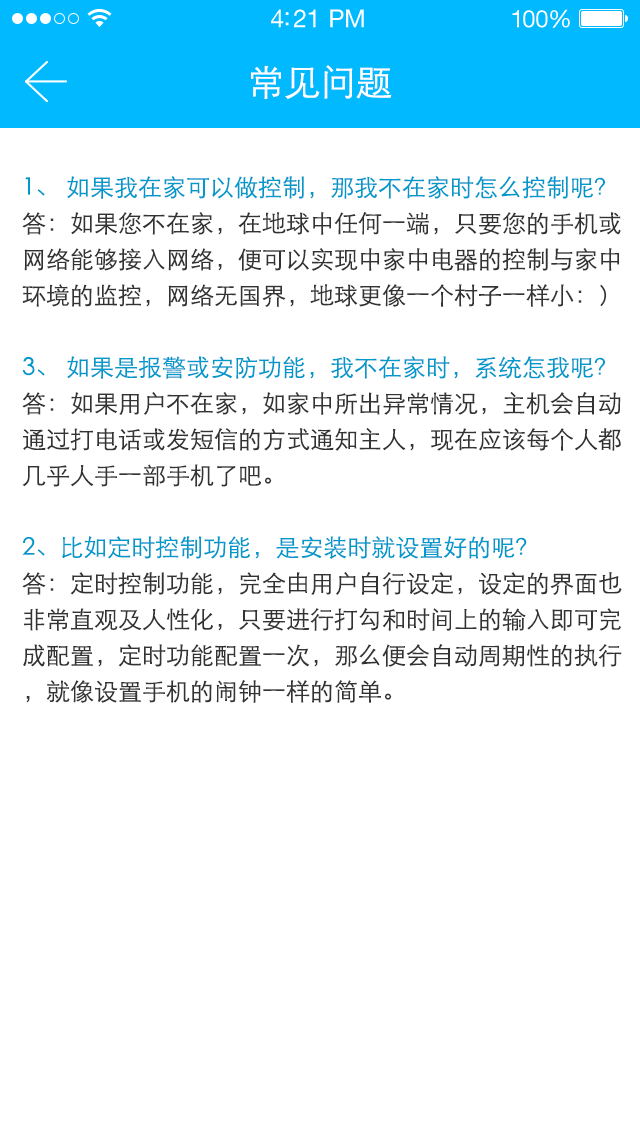
<style>
.page{position:relative;width:640px;height:1136px;background:#ffffff}
.page>*{position:absolute;margin:0}
.t1{font:25px "HelveticaNeueLTStd-Roman";letter-spacing:-0.02em;color:#ffffff}
.t2{font:24px "HelveticaNeueLTStd-Roman";letter-spacing:-0.02em;color:#ffffff}
.t3{font:36px "STXihei";color:#ffffff;text-transform:uppercase}
.t4{font:24px/36px "STXihei";color:#333333;text-transform:uppercase}
.t5{font:24px/36px "STXihei";color:#0099cc;text-transform:uppercase}
</style>
<div class="page">
<p class="t1" style="left:271px;top:9px;width:93px;height:19px">4:21 PM</p>
<p class="t2" style="left:512px;top:9px;width:58px;height:19px">100%</p>
<p class="t3" style="left:251px;top:65px;width:141px;height:34px">常见问题</p>
<p class="t4" style="left:22px;top:176px;width:600px;height:527px"><span class="t5">1、 如果我在家可以做控制，那我不在家时怎么控制呢？</span> <br>答：如果您不在家，在地球中任何一端，只要您的手机或网络能够接入网络，便可以实现中家中电器的控制与家中环境的监控，网络无国界，地球更像一个村子一样小：）<br> <br><span class="t5">3、 如果是报警或安防功能，我不在家时，系统怎我呢？</span> <br>答：如果用户不在家，如家中所出异常情况，主机会自动通过打电话或发短信的方式通知主人，现在应该每个人都几乎人手一部手机了吧。<br><br><span class="t5">2、比如定时控制功能，是安装时就设置好的呢？ <br></span>答：定时控制功能，完全由用户自行设定，设定的界面也非常直观及人性化，只要进行打勾和时间上的输入即可完成配置，定时功能配置一次，那么便会自动周期性的执行，就像设置手机的闹钟一样的简单。</p>
</div>
